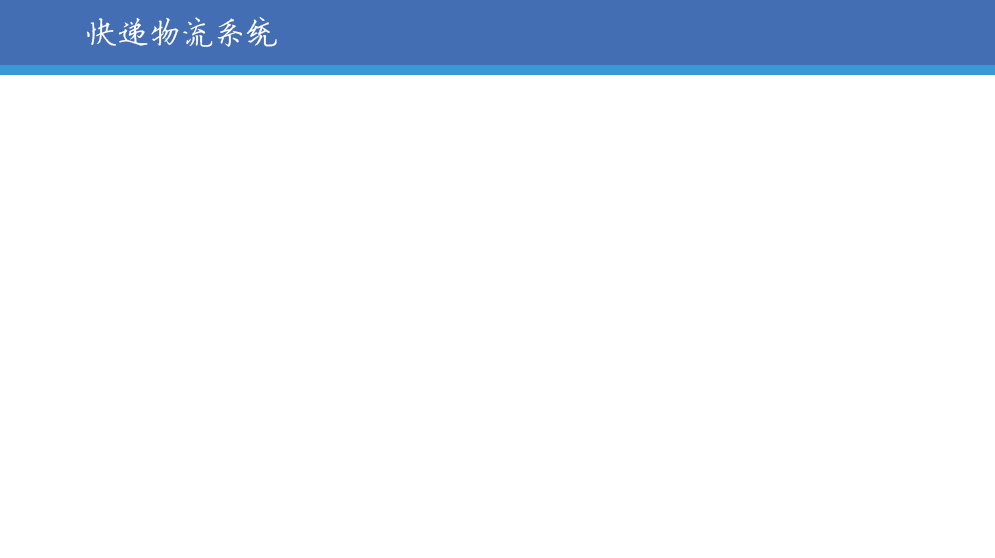
<style>
.page{position:relative;width:995px;height:558px;background:#ffffff}
.page>*{position:absolute;margin:0}
.t1{font:32px "FZYBKSJW--GB1-0";color:#ffffff}
</style>
<div class="page">
<p class="t1" style="left:86px;top:17px;width:191px;height:30px">快递物流系统</p>
</div>
